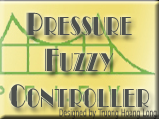
<style>
.page{position:relative;width:159px;height:119px}
.page>*{position:absolute;margin:0}
.t1{font:30px "VNI-Top";color:#4d504d;scale:0.7 1}
</style>
<div class="page">
<p class="t1" style="left:9px;top:12px;width:140px;height:96px;text-align:center">Pressure <br>Fuzzy<br>Controller</p>
</div>
